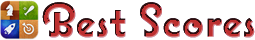
<style>
.page{position:relative;width:255px;height:40px;background:#ffffff}
.page>*{position:absolute;margin:0}
.t1{font:48px "CoquetteBold"}
</style>
<div class="page">
<p class="t1" style="left:42px;top:2px;width:213px;height:36px">Best Scores</p>
<p class="t1" style="left:42px;top:2px;width:213px;height:36px">Best Scores</p>
</div>
